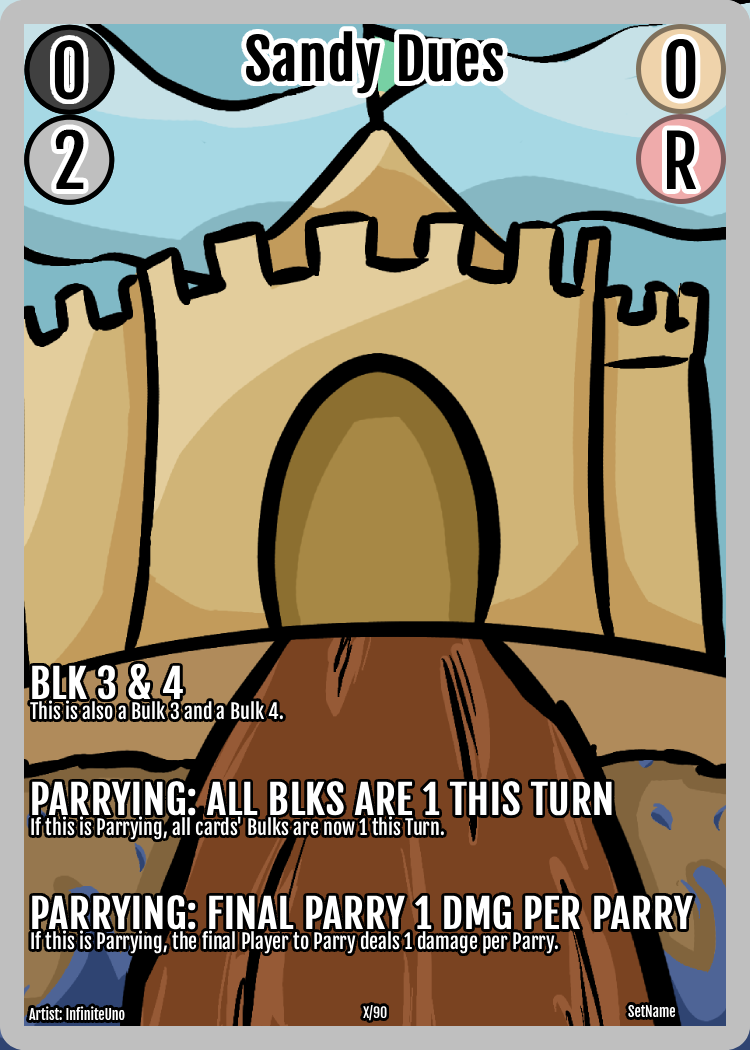
<style>
.page{position:relative;width:750px;height:1050px}
.page>*{position:absolute;margin:0}
.t1{font:56px "FjallaOne-Regular";color:#000000;font-weight:bold}
.t2{font:20px/20px "FjallaOne-Regular";color:#ffffff}
.t3{font:40px/40px "FjallaOne-Regular";color:#ffffff;text-transform:uppercase;font-weight:bold}
.t4{font:14px "FjallaOne-Regular";color:#ffffff}
</style>
<div class="page">
<p class="t1" style="left:246px;top:31px;width:258px;height:63px">Sandy Dues</p>
<p class="t2" style="left:30px;top:663px;width:253px;height:57px"><span class="t3">BLK 3 &amp; 4<br></span>This is also a Bulk 3 and a Bulk 4.</p>
<p class="t2" style="left:31px;top:781px;width:581px;height:59px"><span class="t3">Parrying: All BLKs are 1 this Turn<br></span>If this is Parrying, all cards' Bulks are now 1 this Turn.</p>
<p class="t2" style="left:31px;top:895px;width:662px;height:59px"><span class="t3">Parrying: Final Parry 1 DMG per Parry<br></span>If this is Parrying, the final Player to Parry deals 1 damage per Parry.</p>
<p class="t4" style="left:29px;top:1006px;width:96px;height:14px">Artist: InfiniteUno</p>
<p class="t4" style="left:363px;top:1005px;width:24px;height:16px">X/90</p>
<p class="t4" style="left:628px;top:1005px;width:47px;height:12px">SetName</p>
</div>
